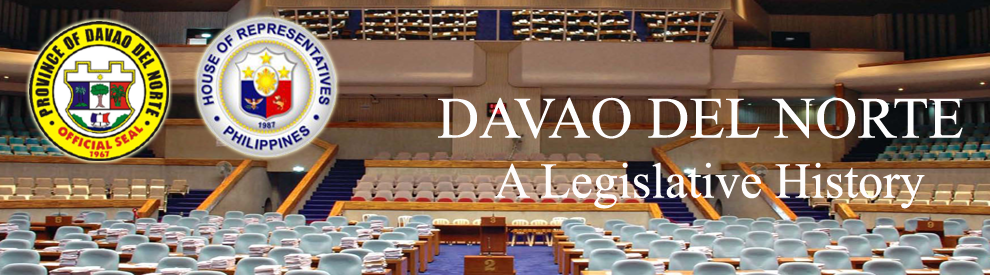
<style>
.page{position:relative;width:990px;height:275px}
.page>*{position:absolute;margin:0}
.t1{font:50px "TimesNewRomanPSMT";color:#fdfcfc}
.t2{font:58.3px "TimesNewRomanPSMT";color:#fdfdfd}
</style>
<div class="page">
<p class="t1" style="left:438px;top:97px;width:525px;height:112px;text-align:center"><span class="t2">DAVAO DEL NORTE<br></span>A Legislative History</p>
</div>
